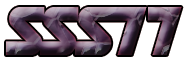
<style>
.page{position:relative;width:188px;height:64px;background:#ffffff}
.page>*{position:absolute;margin:0}
.t1{font:68px "DeathStar"}
</style>
<div class="page">
<p class="t1" style="left:6px;top:7px;width:176px;height:48px">SSS77</p>
<p class="t1" style="left:6px;top:7px;width:176px;height:48px">SSS77</p>
</div>
